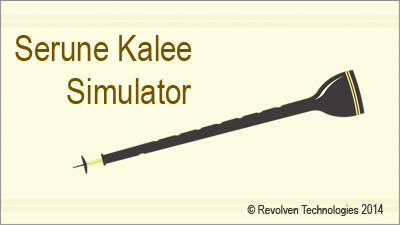
<style>
.page{position:relative;width:400px;height:225px;background:#fefbe3}
.page>*{position:absolute;margin:0}
.t1{font:36px "ArialNarrow";color:#745200}
.t2{font:12px "ArialNarrow";color:#323232}
</style>
<div class="page">
<p class="t1" style="left:15px;top:35px;width:177px;height:69px">Serune Kalee <br>   Simulator</p>
<p class="t2" style="left:247px;top:204px;width:137px;height:12px">© Revolven Technologies 2014</p>
</div>
